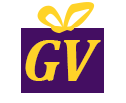
<style>
.page{position:relative;width:126px;height:103px;background:#ffffff}
.page>*{position:absolute;margin:0}
.t1{font:61.4px "Cambria-BoldItalic";color:#ffd328}
</style>
<div class="page">
<p class="t1" style="left:25px;top:40px;width:76px;height:41px">GV</p>
</div>
